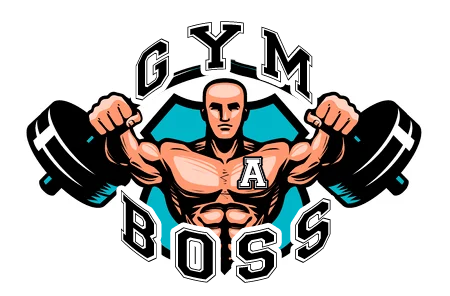
<style>
.page{position:relative;width:450px;height:296px;background:#ffffff}
.page>*{position:absolute;margin:0}
.t1{font:57.4px "CollegiateFLF";letter-spacing:-0.02em;color:#000000}
.t2{font:35.7px "CollegiateFLF";letter-spacing:-0.02em;color:#ffffff}
.t3{font:60px "CollegiateFLF";letter-spacing:-0.02em;color:#000000}
</style>
<div class="page">
<p class="t1" style="left:135px;top:21px;width:178px;height:84px">G Y M</p>
<p class="t2" style="left:238px;top:158px;width:29px;height:30px">A</p>
<p class="t3" style="left:121px;top:190px;width:210px;height:93px">B O S S</p>
</div>
